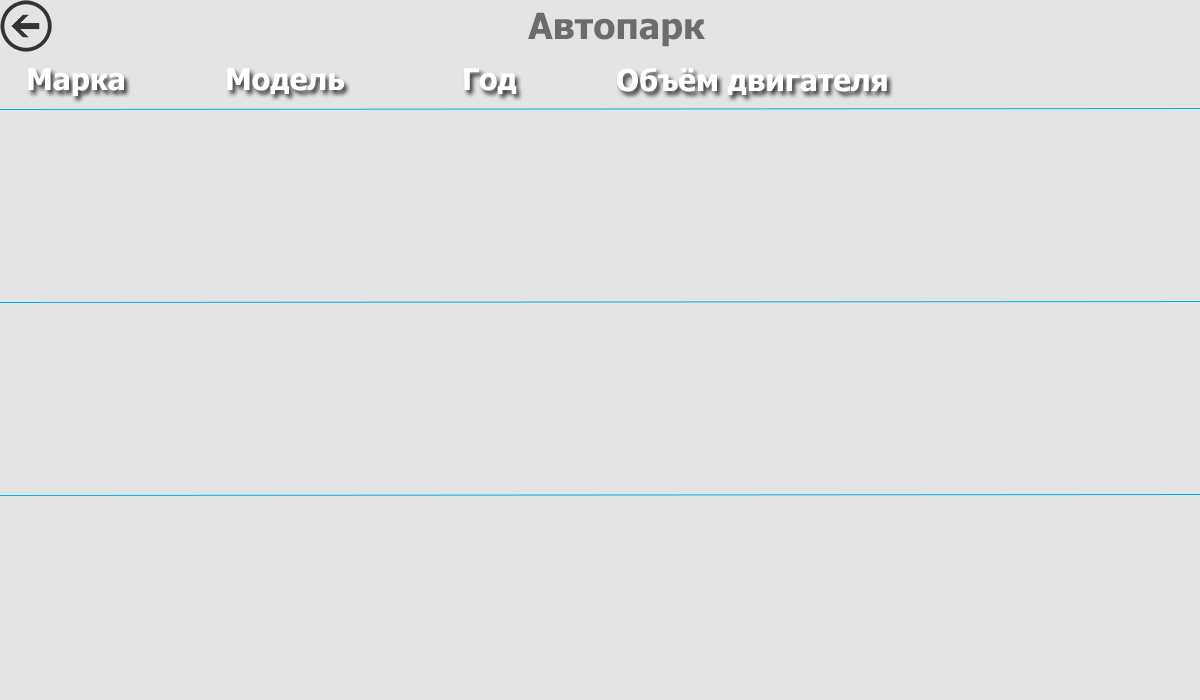
<style>
.page{position:relative;width:1200px;height:700px;background:#e5e4e4}
.page>*{position:absolute;margin:0}
.t1{font:36px "Tahoma-Bold";color:#6c6c6c}
.t2{font:30px "Tahoma-Bold";color:#ffffff}
</style>
<div class="page">
<p class="t1" style="left:528px;top:12px;width:177px;height:35px">Автопарк</p>
<p class="t2" style="left:28px;top:68px;width:96px;height:28px">Марка</p>
<p class="t2" style="left:227px;top:68px;width:117px;height:26px">Модель</p>
<p class="t2" style="left:464px;top:68px;width:53px;height:26px">Год</p>
<p class="t2" style="left:617px;top:68px;width:270px;height:27px">Объём двигателя</p>
</div>
